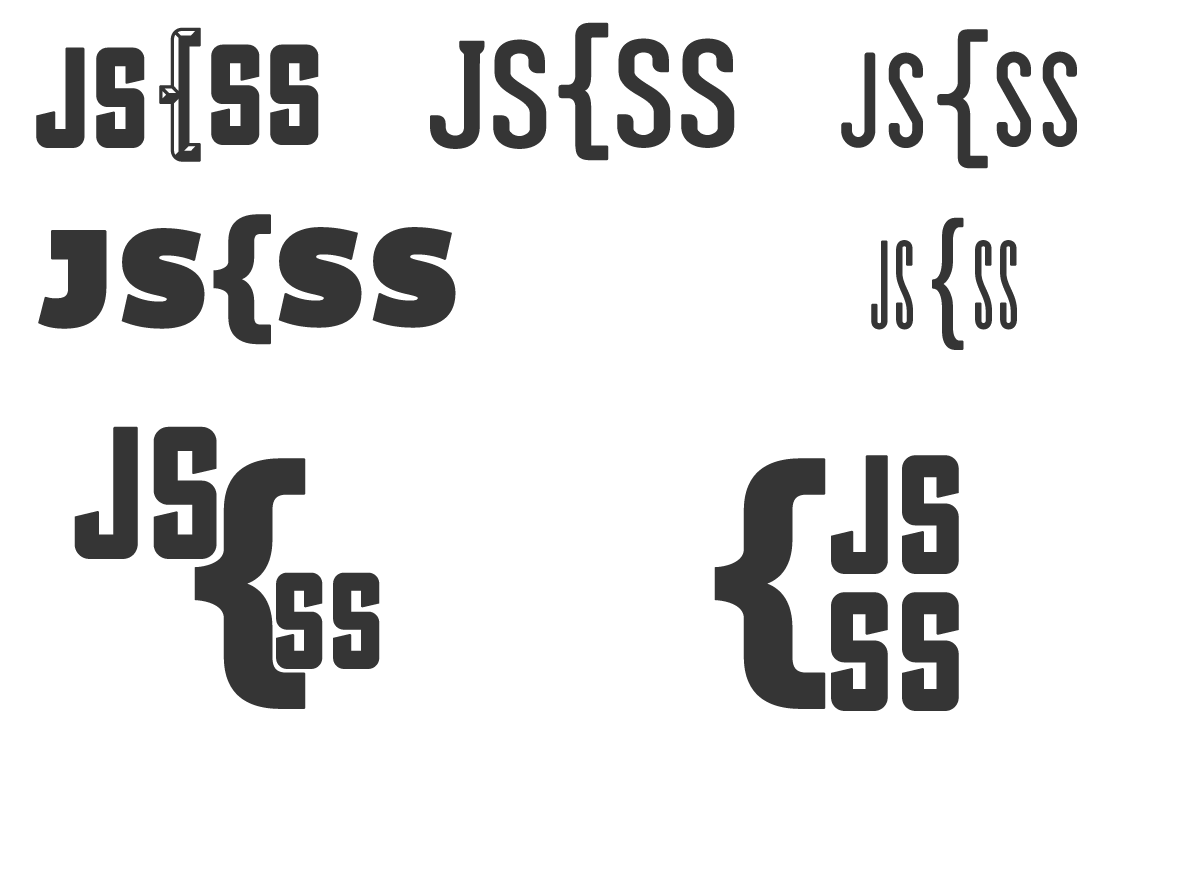
<style>
.page{position:relative;width:1200px;height:880px;background:#ffffff}
.page>*{position:absolute;margin:0}
.t1{font:140.6px "Sullivan-Bevel";letter-spacing:0.01em;color:#353535;font-weight:bold}
.t2{font:140.6px "GearedSlab-Regular";letter-spacing:0.01em;color:#353535;font-weight:bold}
.t3{font:148.4px "GearedSlab-Thin";letter-spacing:0.01em;color:#353535;font-weight:bold}
.t4{font:140.6px "Sullivan-Fill";letter-spacing:0.01em;color:#353535;font-weight:bold}
.t5{font:140.6px "Blanch-Condensed";letter-spacing:0.01em;color:#353535;font-weight:bold}
.t6{font:140.6px "Bemio";letter-spacing:0.01em;color:#353535;font-weight:bold}
.t7{font:141.5px "HelveticaNeue-Light";letter-spacing:0.01em;color:#353535;font-weight:bold}
.t8{font:140.6px "ValenciaRegular";letter-spacing:0.01em;color:#353535;font-weight:bold}
.t9{font:186px "Sullivan-Fill";letter-spacing:0.01em;color:#353535;font-weight:bold}
.t10{font:273.4px "Bemio";letter-spacing:0.01em;color:#353535;font-weight:bold}
.t11{font:166.8px "Sullivan-Fill";letter-spacing:0.01em;color:#353535;font-weight:bold}
.t12{font:134.9px "Sullivan-Fill";letter-spacing:0.01em;color:#353535;font-weight:bold}
</style>
<div class="page">
<p class="t1" style="left:159px;top:27px;width:42px;height:135px">{</p>
<p class="t2" style="left:558px;top:22px;width:51px;height:139px">{</p>
<p class="t3" style="left:937px;top:29px;width:51px;height:140px">{</p>
<p class="t2" style="left:430px;top:39px;width:117px;height:110px">JS</p>
<p class="t2" style="left:617px;top:38px;width:118px;height:110px">SS</p>
<p class="t4" style="left:36px;top:47px;width:109px;height:101px">JS</p>
<p class="t4" style="left:211px;top:44px;width:108px;height:101px">SS</p>
<p class="t5" style="left:841px;top:52px;width:82px;height:96px">JS</p>
<p class="t5" style="left:996px;top:51px;width:81px;height:96px">SS</p>
<p class="t6" style="left:213px;top:214px;width:58px;height:131px">{</p>
<p class="t7" style="left:932px;top:217px;width:32px;height:133px">{</p>
<p class="t6" style="left:38px;top:228px;width:167px;height:101px">JS</p>
<p class="t6" style="left:278px;top:227px;width:178px;height:101px">SS</p>
<p class="t8" style="left:871px;top:240px;width:42px;height:90px">JS</p>
<p class="t8" style="left:975px;top:240px;width:42px;height:90px">SS</p>
<p class="t9" style="left:74px;top:426px;width:143px;height:133px">JS</p>
<p class="t10" style="left:194px;top:458px;width:112px;height:251px">{</p>
<p class="t10" style="left:714px;top:458px;width:112px;height:251px">{</p>
<p class="t11" style="left:831px;top:455px;width:128px;height:119px">JS</p>
<p class="t12" style="left:276px;top:572px;width:104px;height:97px">SS</p>
<p class="t11" style="left:831px;top:592px;width:128px;height:119px">SS</p>
</div>
